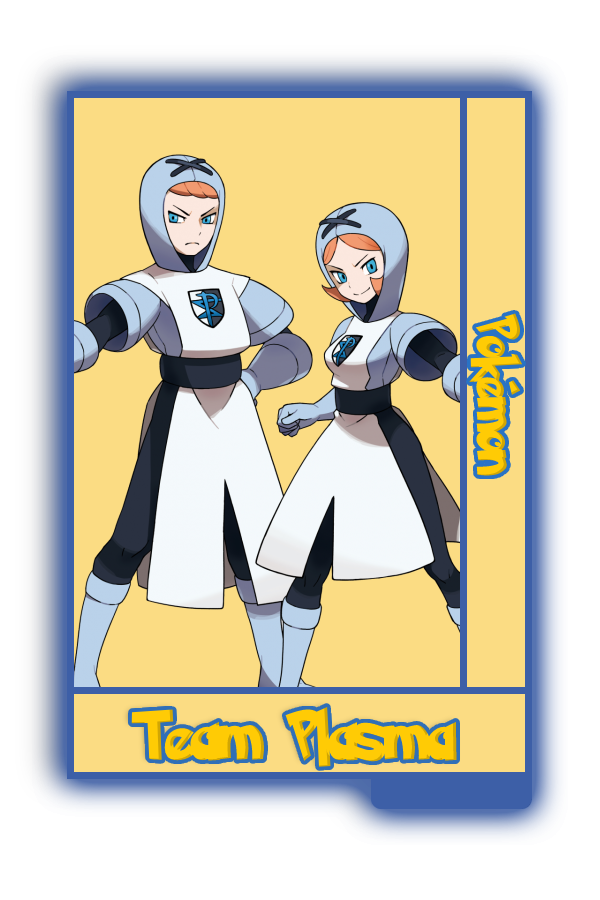
<style>
.page{position:relative;width:600px;height:900px;background:#fbdc83}
.page>*{position:absolute;margin:0}
.t1{font:48.8px "PokemonSolidNormal";color:#ffcb05;scale:0.8 1}
.t2{font:56.6px "PokemonSolidNormal";color:#ffcb05;scale:0.92 1}
</style>
<div class="page">
<p class="t1" style="left:469px;top:313px;width:54px;height:163px;rotate:90deg">Pokémon</p>
<p class="t2" style="left:131px;top:706px;width:326px;height:61px">Team Plasma</p>
</div>
